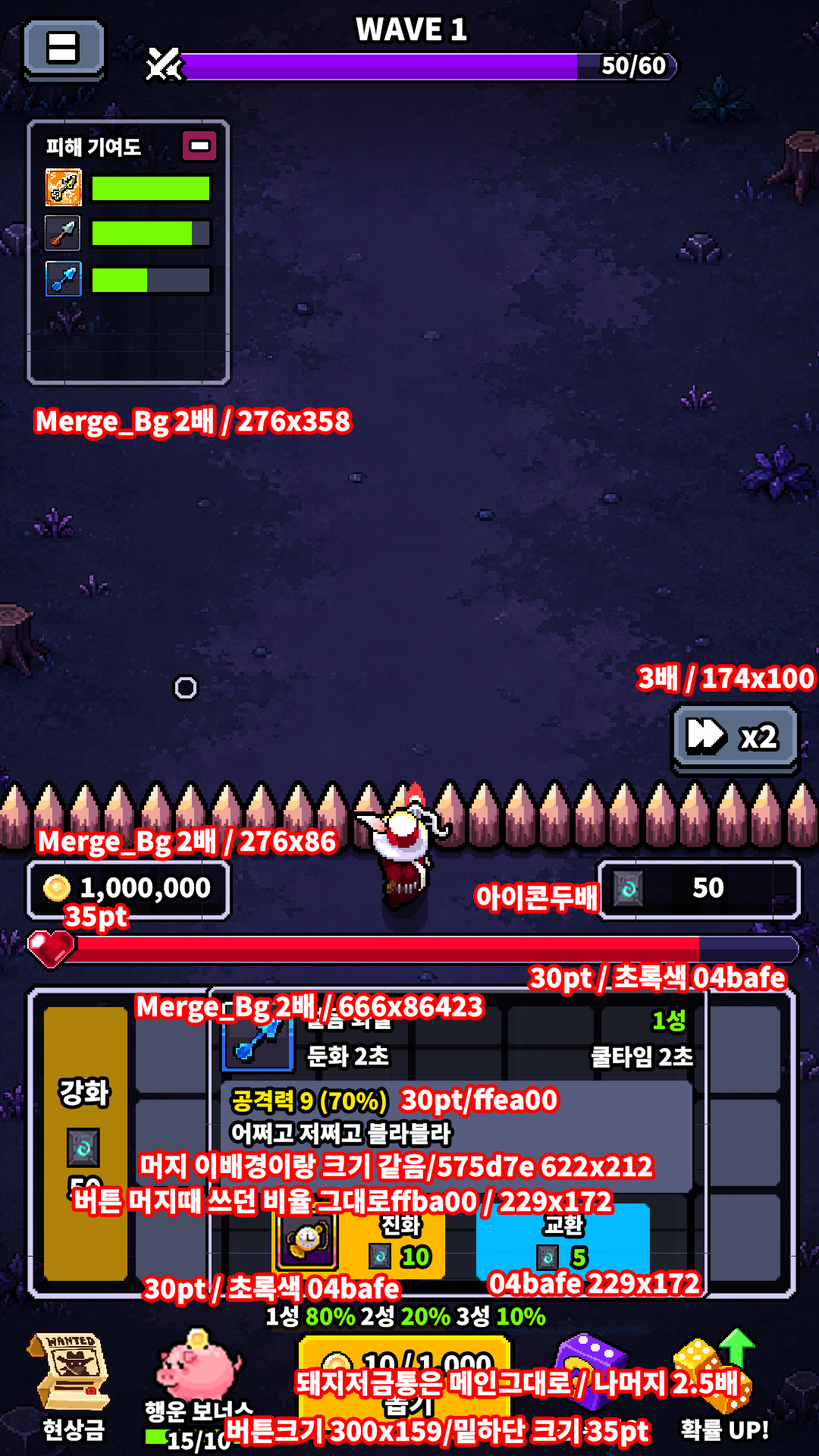
<style>
.page{position:relative;width:819px;height:1456px}
.page>*{position:absolute;margin:0}
.t1{font:30.3px "NotoSansKR-Black";color:#ffffff}
.t2{font:22.7px "NotoSansKR-Black";color:#ffffff}
.t3{font:19.7px "NotoSansKR-Black";color:#ffffff}
.t4{font:57.3px "NotoSansKR-Black";color:#ffffff}
.t5{font:26.5px "NotoSansKR-Black";color:#ffffff}
.t6{font:22.7px "NotoSansKR-Black";color:#78fe04}
.t7{font:22.7px "NotoSansKR-Black";color:#ffea00}
.t8{font:26.5px "NotoSansKR-Black"}
.t9{font:21.2px "NotoSansKR-Black";color:#ffffff}
</style>
<div class="page">
<p class="t1" style="left:356px;top:17px;width:111px;height:24px">WAVE 1</p>
<p class="t2" style="left:602px;top:55px;width:64px;height:23px">50/60</p>
<p class="t3" style="left:46px;top:137px;width:95px;height:20px">피해 기여도</p>
<p class="t4" style="left:191px;top:142px;width:18px;height:7px">-</p>
<p class="t5" style="left:36px;top:408px;width:314px;height:30px">Merge_Bg 2배 / 276x358</p>
<p class="t5" style="left:639px;top:665px;width:175px;height:28px">3배 / 174x100</p>
<p class="t1" style="left:741px;top:725px;width:36px;height:23px">x2</p>
<p class="t5" style="left:39px;top:828px;width:297px;height:30px">Merge_Bg 2배 / 276x86</p>
<p class="t5" style="left:81px;top:877px;width:130px;height:26px">1,000,000</p>
<p class="t5" style="left:692px;top:877px;width:32px;height:21px">50</p>
<p class="t5" style="left:477px;top:885px;width:120px;height:26px">아이콘두배</p>
<p class="t5" style="left:65px;top:905px;width:62px;height:27px">35pt</p>
<p class="t5" style="left:530px;top:965px;width:255px;height:28px">30pt / 초록색 04bafe</p>
<p class="t5" style="left:137px;top:993px;width:345px;height:30px">Merge_Bg 2배 / 666x86423</p>
<p class="t2" style="left:305px;top:1007px;width:88px;height:22px">얼음 화살</p>
<p class="t6" style="left:654px;top:1009px;width:32px;height:23px">1성</p>
<p class="t2" style="left:307px;top:1045px;width:82px;height:22px">둔화 2초</p>
<p class="t2" style="left:591px;top:1046px;width:102px;height:22px">쿨타임 2초</p>
<p class="t5" style="left:61px;top:1080px;width:47px;height:26px">강화</p>
<p class="t7" style="left:233px;top:1090px;width:153px;height:25px">공격력 9 (70%)</p>
<p class="t5" style="left:401px;top:1087px;width:156px;height:28px">30pt/ffea00</p>
<p class="t2" style="left:232px;top:1122px;width:219px;height:23px">어쩌고 저쩌고 블라블라</p>
<p class="t5" style="left:141px;top:1153px;width:511px;height:28px">머지 이배경이랑 크기 같음/575d7e 622x212</p>
<p class="t8" style="left:69px;top:1178px;width:32px;height:21px">50</p>
<p class="t5" style="left:75px;top:1188px;width:536px;height:28px">버튼 머지때 쓰던 비율 그대로ffba00 / 229x172</p>
<p class="t9" style="left:382px;top:1215px;width:38px;height:20px">진화</p>
<p class="t9" style="left:544px;top:1215px;width:39px;height:20px">교환</p>
<p class="t6" style="left:403px;top:1247px;width:26px;height:19px">10</p>
<p class="t6" style="left:573px;top:1249px;width:12px;height:17px">5</p>
<p class="t5" style="left:144px;top:1275px;width:255px;height:29px">30pt / 초록색 04bafe</p>
<p class="t5" style="left:490px;top:1271px;width:209px;height:23px">04bafe 229x172</p>
<p class="t6" style="left:267px;top:1305px;width:279px;height:23px"><span class="t2">1성 </span>80% <span class="t2">2성</span> 20% <span class="t2">3성 </span>10%</p>
<p class="t5" style="left:365px;top:1353px;width:126px;height:28px">10 / 1,000</p>
<p class="t5" style="left:297px;top:1370px;width:440px;height:28px">돼지저금통은 메인그대로 / 나머지 2.5배</p>
<p class="t5" style="left:385px;top:1390px;width:46px;height:26px">뽑기</p>
<p class="t2" style="left:145px;top:1401px;width:109px;height:22px">행운 보너스</p>
<p class="t2" style="left:43px;top:1419px;width:62px;height:23px">현상금</p>
<p class="t5" style="left:227px;top:1418px;width:421px;height:29px">버튼크기 300x159/밑하단 크기 35pt</p>
<p class="t2" style="left:681px;top:1419px;width:87px;height:22px">확률 UP!</p>
<p class="t2" style="left:168px;top:1430px;width:63px;height:24px">15/10</p>
</div>
